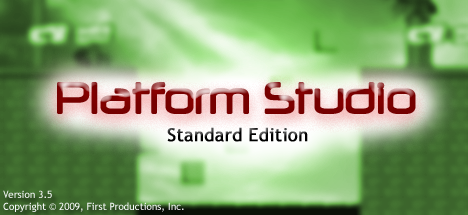
<style>
.page{position:relative;width:468px;height:215px}
.page>*{position:absolute;margin:0}
.t1{font:52.5px "Neuropol";color:#7b0000;font-weight:bold;scale:0.8 1}
.t2{font:18px "TrebuchetMS";font-weight:bold}
.t3{font:10px "TrebuchetMS";color:#e7edf8}
</style>
<div class="page">
<p class="t1" style="left:57px;top:82px;width:359px;height:32px">Platform Studio</p>
<p class="t2" style="left:167px;top:127px;width:141px;height:15px">Standard Edition</p>
<p class="t3" style="left:3px;top:190px;width:181px;height:22px">Version 3.5<br>Copyright © 2009, First Productions, Inc.</p>
</div>
